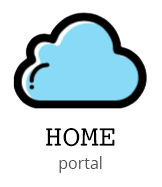
<style>
.page{position:relative;width:162px;height:187px;background:#ffffff}
.page>*{position:absolute;margin:0}
.t1{font:30px "Courier";color:#000000}
.t2{font:16px "OpenSans-Regular";color:#555555}
</style>
<div class="page">
<p class="t1" style="left:46px;top:128px;width:69px;height:19px">HOME</p>
<p class="t2" style="left:59px;top:156px;width:43px;height:17px">portal</p>
</div>
